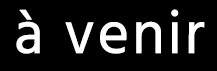
<style>
.page{position:relative;width:217px;height:71px;background:#000000}
.page>*{position:absolute;margin:0}
.t1{font:60px "Hind-Regular";letter-spacing:0.025em;color:#ffffff;font-weight:bold}
</style>
<div class="page">
<p class="t1" style="left:16px;top:9px;width:189px;height:45px">à venir</p>
</div>
